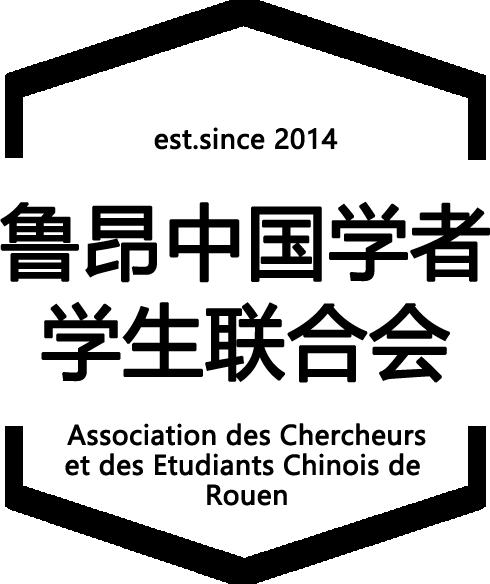
<style>
.page{position:relative;width:490px;height:584px;background:#ffffff}
.page>*{position:absolute;margin:0}
.t1{font:26px "MicrosoftYaHei";color:#000000;font-weight:bold}
.t2{font:80px/100px "MicrosoftYaHei";color:#000000;font-weight:bold}
.t3{font:26px/30px "MicrosoftYaHei";color:#000000;font-weight:bold}
</style>
<div class="page">
<p class="t1" style="left:154px;top:127px;width:184px;height:23px">est.since 2014</p>
<p class="t2" style="left:0px;top:201px;width:490px;height:182px;text-align:center">鲁昂中国学者<br>学生联合会</p>
<p class="t3" style="left:65px;top:423px;width:361px;height:83px;text-align:center">Association des Chercheurs<br>et des Etudiants Chinois de <br>Rouen</p>
</div>
